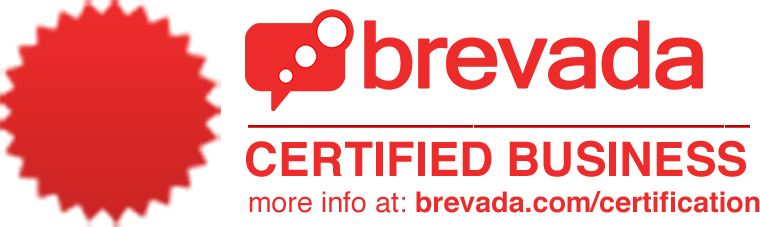
<style>
.page{position:relative;width:760px;height:227px;background:#ffffff}
.page>*{position:absolute;margin:0}
.t1{font:54.9px "Helvetica";color:#bd0000;scale:0.82 1}
.t2{font:47.4px "Helvetica-Bold";color:#ee2b2b}
.t3{font:28.7px "Helvetica-Bold";color:#ee2b2b}
.t4{font:28.7px "Helvetica";color:#ee2b2b}
</style>
<div class="page">
<p class="t1" style="left:248px;top:125px;width:502px;height:3px">____________________</p>
<p class="t2" style="left:246px;top:140px;width:500px;height:37px">CERTIFIED BUSINESS</p>
<p class="t3" style="left:249px;top:191px;width:511px;height:22px"><span class="t4">more info at: </span>brevada.com/certification</p>
</div>
